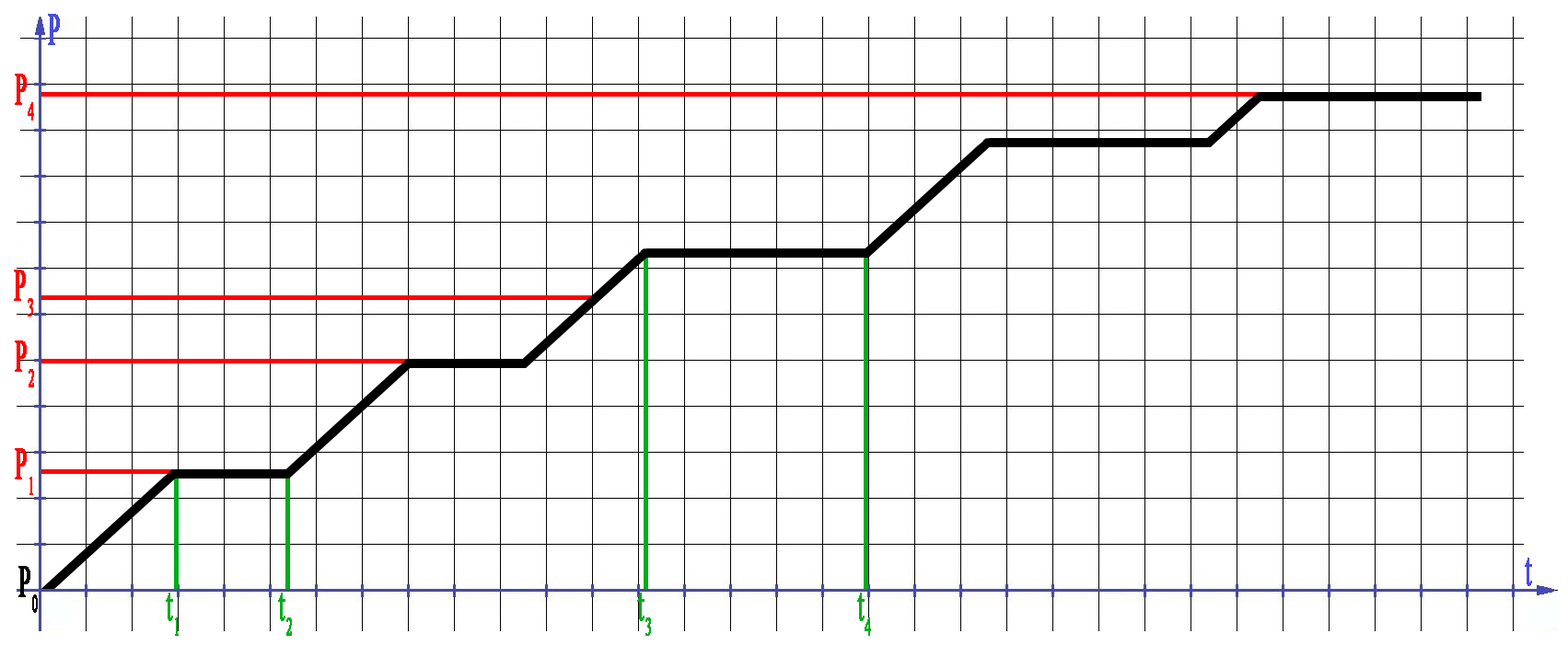
<style>
.page{position:relative;width:1568px;height:657px;background:#ffffff}
.page>*{position:absolute;margin:0}
.t1{font:45.7px "TimesNewRomanPSMT";letter-spacing:0.02em;color:#484ce1;font-weight:bold;scale:0.5 1}
.t2{font:45.7px "TimesNewRomanPSMT";letter-spacing:0.02em;color:#ff0000;font-weight:bold;scale:0.5 1}
.t3{font:45.7px "TimesNewRomanPSMT";letter-spacing:0.02em;color:#000000;font-weight:bold;scale:0.5 1}
.t4{font:45.7px "TimesNewRomanPSMT";letter-spacing:0.02em;color:#00ac1c;font-weight:bold;scale:0.5 1}
</style>
<div class="page">
<p class="t1" style="left:48px;top:14px;width:12px;height:31px">P</p>
<p class="t2" style="left:15px;top:74px;width:19px;height:47px">P4</p>
<p class="t2" style="left:14px;top:270px;width:19px;height:47px">P3</p>
<p class="t2" style="left:15px;top:341px;width:19px;height:47px">P2</p>
<p class="t2" style="left:15px;top:448px;width:18px;height:47px">P1</p>
<p class="t1" style="left:1525px;top:558px;width:7px;height:29px">t</p>
<p class="t3" style="left:18px;top:566px;width:20px;height:47px">P0</p>
<p class="t4" style="left:166px;top:593px;width:13px;height:43px">t1</p>
<p class="t4" style="left:278px;top:593px;width:14px;height:43px">t2</p>
<p class="t4" style="left:637px;top:593px;width:14px;height:43px">t3</p>
<p class="t4" style="left:857px;top:593px;width:14px;height:43px">t4</p>
</div>
